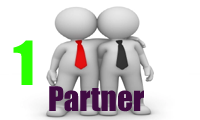
<style>
.page{position:relative;width:200px;height:120px;background:#ffffff}
.page>*{position:absolute;margin:0}
.t1{font:56.2px "Impact";color:#2aff00}
.t2{font:31.2px "Impact";color:#410b43}
</style>
<div class="page">
<p class="t1" style="left:13px;top:40px;width:20px;height:45px">1</p>
<p class="t2" style="left:49px;top:86px;width:95px;height:26px">Partner</p>
</div>
